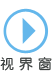
<style>
.page{position:relative;width:55px;height:75px;background:#ffffff}
.page>*{position:absolute;margin:0}
.t1{font:14px "ç»å¸ä¸­åç®-regular";letter-spacing:0.36em;color:#393d3c}
</style>
<div class="page">
<p class="t1" style="left:0px;top:57px;width:52px;height:14px">视界窗</p>
</div>
